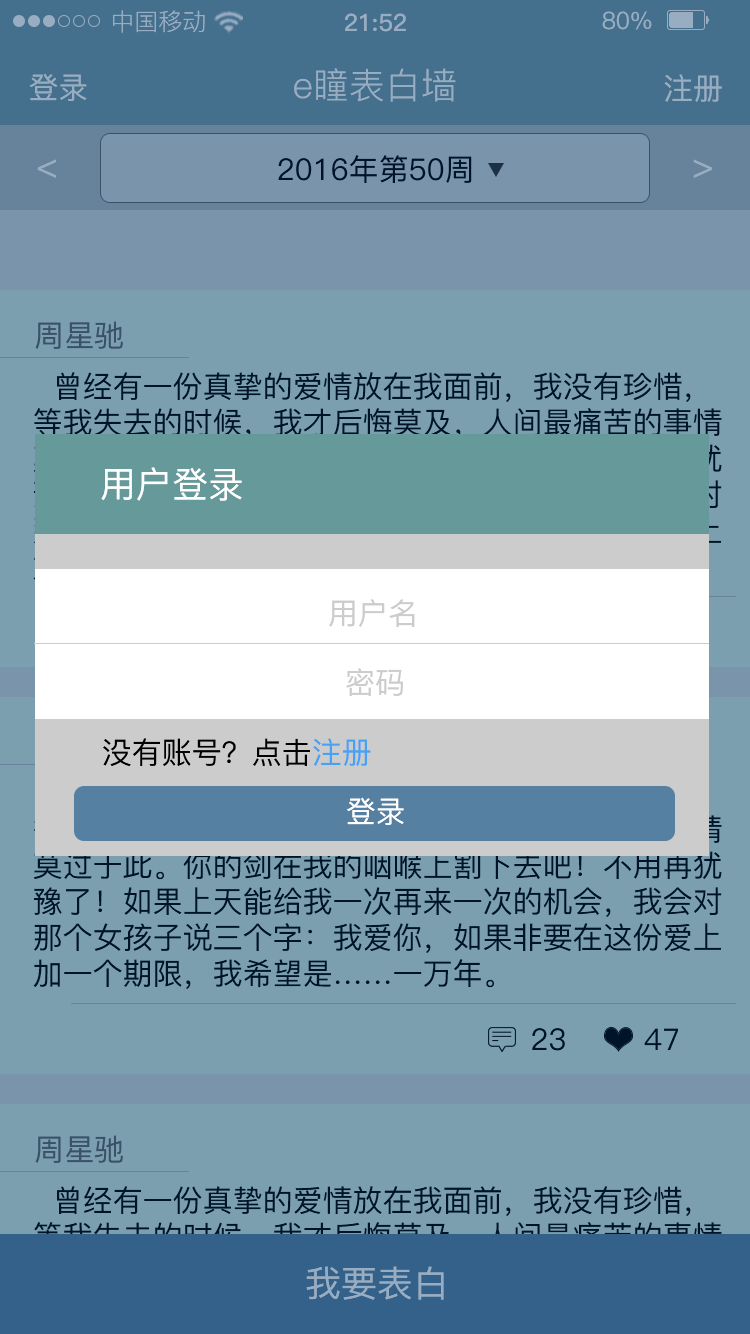
<style>
.page{position:relative;width:750px;height:1334px;background:#7b9faf}
.page>*{position:absolute;margin:0}
.t1{font:24px "PingFang-SC-Regular";color:#99adc2}
.t2{font:24px "PingFang-SC-Bold";color:#99adc2}
.t3{font:24px "PingFang-SC-Medium";color:#99adc2}
.t4{font:30px "PingFang-SC-Medium";color:#99adc2}
.t5{font:36px "PingFang-SC-Regular";color:#99adc2}
.t6{font:30px "PingFang-SC-Medium";color:#001429}
.t7{font:30px "PingFang-SC-Medium";color:#3a5169}
.t8{font:30px "PingFang-SC-Medium"}
.t9{font:36px "PingFang-SC-Medium";color:#ffffff}
.t10{font:30px "PingFang-SC-Medium";color:#cccccc}
.t11{font:30px "PingFang-SC-Medium";color:#000000}
.t12{font:30px "PingFang-SC-Medium";color:#47a1f4}
.t13{font:30px "PingFang-SC-Medium";color:#ffffff}
.t14{font:36px "PingFang-SC-Medium";color:#99adc2}
</style>
<div class="page">
<p class="t1" style="left:113px;top:10px;width:92px;height:23px">中国移动</p>
<p class="t2" style="left:345px;top:13px;width:61px;height:19px">21:52</p>
<p class="t3" style="left:602px;top:11px;width:50px;height:19px">80%</p>
<p class="t4" style="left:29px;top:73px;width:58px;height:28px">登录</p>
<p class="t5" style="left:294px;top:68px;width:162px;height:34px">e瞳表白墙</p>
<p class="t4" style="left:664px;top:74px;width:58px;height:28px">注册</p>
<p class="t6" style="left:278px;top:155px;width:194px;height:28px">2016年第50周</p>
<p class="t7" style="left:35px;top:321px;width:88px;height:28px">周星驰</p>
<p class="t8" style="left:33px;top:372px;width:689px;height:210px">曾经有一份真挚的爱情放在我面前，我没有珍惜，<br>等我失去的时候，我才后悔莫及，人间最痛苦的事情<br>莫过于此。你的剑在我的咽喉上割下去吧！不用再犹<br>豫了！如果上天能给我一次再来一次的机会，我会对<br>那个女孩子说三个字：我爱你，如果非要在这份爱上<br>加一个期限，我希望是……一万年。</p>
<p class="t9" style="left:101px;top:467px;width:141px;height:34px">用户登录</p>
<p class="t10" style="left:329px;top:599px;width:86px;height:28px">用户名</p>
<p class="t10" style="left:346px;top:668px;width:57px;height:28px">密码</p>
<p class="t11" style="left:103px;top:738px;width:268px;height:29px">没有账号？点击<span class="t12">注册</span></p>
<p class="t8" style="left:33px;top:779px;width:689px;height:210px">曾经有一份真挚的爱情放在我面前，我没有珍惜，<br>等我失去的时候，我才后悔莫及，人间最痛苦的事情<br>莫过于此。你的剑在我的咽喉上割下去吧！不用再犹<br>豫了！如果上天能给我一次再来一次的机会，我会对<br>那个女孩子说三个字：我爱你，如果非要在这份爱上<br>加一个期限，我希望是……一万年。</p>
<p class="t13" style="left:347px;top:797px;width:57px;height:28px">登录</p>
<p class="t6" style="left:532px;top:1028px;width:33px;height:23px">23</p>
<p class="t6" style="left:644px;top:1028px;width:34px;height:22px">47</p>
<p class="t7" style="left:35px;top:1135px;width:88px;height:28px">周星驰</p>
<p class="t14" style="left:306px;top:1266px;width:138px;height:34px">我要表白</p>
</div>
